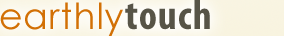
<style>
.page{position:relative;width:284px;height:36px}
.page>*{position:absolute;margin:0}
.t1{font:36px "CenturyGothic";letter-spacing:0.025em;color:#d27005}
.t2{font:42px "MyriadPro-BoldCond";letter-spacing:0.025em;color:#575447}
</style>
<div class="page">
<p class="t1" style="left:0px;top:0px;width:210px;height:36px">earthly<span class="t2">touch</span></p>
</div>
